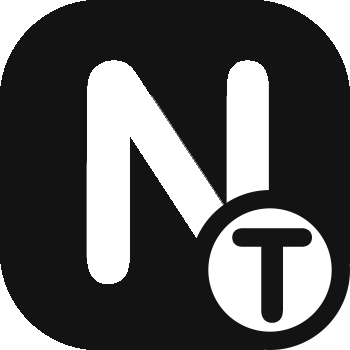
<style>
.page{position:relative;width:350px;height:350px;background:#131313}
.page>*{position:absolute;margin:0}
.t1{font:125px "ArialRoundedMTBold";color:#141414;font-weight:bold}
</style>
<div class="page">
<p class="t1" style="left:232px;top:228px;width:80px;height:95px">T</p>
</div>
